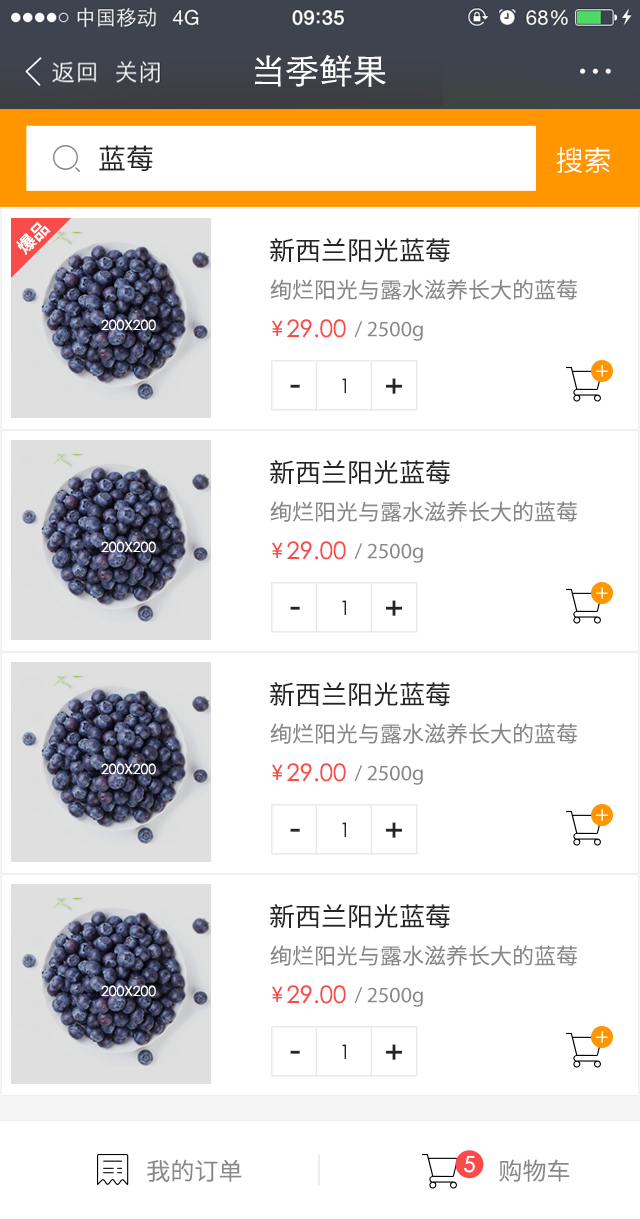
<style>
.page{position:relative;width:640px;height:1219px;background:#ffffff}
.page>*{position:absolute;margin:0}
.t1{font:34px "STXihei";color:#ffffff}
.t2{font:28px "SourceHanSansCN-Normal";color:#252525}
.t3{font:28px "SourceHanSansCN-Normal";color:#ffffff}
.t4{font:18px "SourceHanSansCN-Medium";color:#ffffff}
.t5{font:26px "SourceHanSansCN-Normal";color:#252525}
.t6{font:22px "SourceHanSansCN-Normal";color:#888888}
.t7{font:14px "STXihei";color:#ffffff}
.t8{font:35.7px "STXihei";color:#fa4848}
.t9{font:23.8px "STXihei";color:#fa4b4b}
.t10{font:21.8px "MyriadPro-Regular";color:#888888}
.t11{font:36px "DFPHeiW7";color:#252525}
.t12{font:20px "STXihei";color:#252525}
.t13{font:21.9px "STXihei";color:#ffffff}
.t14{font:24px "SourceHanSansCN-Normal";color:#888888}
</style>
<div class="page">
<p class="t1" style="left:255px;top:55px;width:131px;height:32px">当季鲜果</p>
<p class="t2" style="left:99px;top:145px;width:54px;height:26px">蓝莓</p>
<p class="t3" style="left:556px;top:147px;width:54px;height:26px">搜索</p>
<p class="t4" style="left:16px;top:221px;width:35px;height:34px;rotate:-45deg">爆品</p>
<p class="t5" style="left:270px;top:238px;width:180px;height:25px">新西兰阳光蓝莓</p>
<p class="t6" style="left:270px;top:279px;width:307px;height:21px">绚烂阳光与露水滋养长大的蓝莓</p>
<p class="t7" style="left:101px;top:319px;width:55px;height:12px">200X200</p>
<p class="t8" style="left:272px;top:320px;width:11px;height:16px">¥</p>
<p class="t9" style="left:287px;top:319px;width:59px;height:19px">29.00</p>
<p class="t10" style="left:354px;top:321px;width:69px;height:20px">/ 2500g</p>
<p class="t11" style="left:290px;top:384px;width:10px;height:4px">-</p>
<p class="t12" style="left:342px;top:378px;width:4px;height:15px">1</p>
<p class="t11" style="left:386px;top:378px;width:16px;height:16px">+</p>
<p class="t5" style="left:270px;top:460px;width:180px;height:25px">新西兰阳光蓝莓</p>
<p class="t6" style="left:270px;top:501px;width:307px;height:21px">绚烂阳光与露水滋养长大的蓝莓</p>
<p class="t7" style="left:101px;top:541px;width:55px;height:12px">200X200</p>
<p class="t8" style="left:272px;top:542px;width:11px;height:16px">¥</p>
<p class="t9" style="left:287px;top:541px;width:59px;height:19px">29.00</p>
<p class="t10" style="left:354px;top:543px;width:69px;height:20px">/ 2500g</p>
<p class="t11" style="left:290px;top:606px;width:10px;height:4px">-</p>
<p class="t12" style="left:342px;top:600px;width:4px;height:15px">1</p>
<p class="t11" style="left:386px;top:600px;width:16px;height:16px">+</p>
<p class="t5" style="left:270px;top:682px;width:180px;height:25px">新西兰阳光蓝莓</p>
<p class="t6" style="left:270px;top:723px;width:307px;height:21px">绚烂阳光与露水滋养长大的蓝莓</p>
<p class="t7" style="left:101px;top:763px;width:55px;height:12px">200X200</p>
<p class="t8" style="left:272px;top:764px;width:11px;height:16px">¥</p>
<p class="t9" style="left:287px;top:763px;width:59px;height:19px">29.00</p>
<p class="t10" style="left:354px;top:765px;width:69px;height:20px">/ 2500g</p>
<p class="t12" style="left:342px;top:822px;width:4px;height:15px">1</p>
<p class="t11" style="left:386px;top:822px;width:16px;height:16px">+</p>
<p class="t11" style="left:290px;top:828px;width:10px;height:4px">-</p>
<p class="t5" style="left:270px;top:904px;width:180px;height:25px">新西兰阳光蓝莓</p>
<p class="t6" style="left:270px;top:945px;width:307px;height:21px">绚烂阳光与露水滋养长大的蓝莓</p>
<p class="t7" style="left:101px;top:985px;width:55px;height:12px">200X200</p>
<p class="t8" style="left:272px;top:986px;width:11px;height:16px">¥</p>
<p class="t9" style="left:287px;top:985px;width:59px;height:19px">29.00</p>
<p class="t10" style="left:354px;top:987px;width:69px;height:20px">/ 2500g</p>
<p class="t12" style="left:342px;top:1044px;width:4px;height:15px">1</p>
<p class="t11" style="left:386px;top:1044px;width:16px;height:16px">+</p>
<p class="t11" style="left:290px;top:1050px;width:10px;height:4px">-</p>
<p class="t13" style="left:464px;top:1156px;width:11px;height:17px">5</p>
<p class="t14" style="left:147px;top:1159px;width:95px;height:23px">我的订单</p>
<p class="t14" style="left:499px;top:1159px;width:71px;height:23px">购物车</p>
</div>
